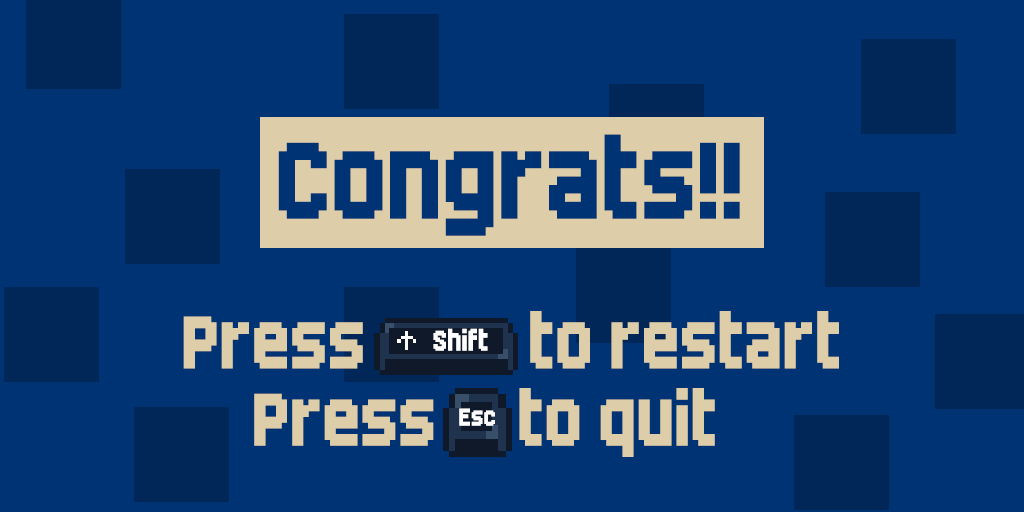
<style>
.page{position:relative;width:1024px;height:512px;background:#003373}
.page>*{position:absolute;margin:0}
.t1{font:134.7px "Born2bSportyFS";color:#003373;scale:0.94 1}
.t2{font:91.9px "Born2bSportyFS";color:#ddcda9;scale:0.94 1}
.t3{font:35.1px "Born2bSportyFS";color:#ffffff;scale:0.94 1}
.t4{font:30.3px "Born2bSportyFS";color:#ffffff;scale:0.94 1}
</style>
<div class="page">
<p class="t1" style="left:278px;top:134px;width:462px;height:102px">Congrats!!</p>
<p class="t2" style="left:183px;top:311px;width:656px;height:58px">Press          to restart</p>
<p class="t3" style="left:433px;top:328px;width:55px;height:23px">Shift</p>
<p class="t2" style="left:254px;top:388px;width:461px;height:69px">Press     to quit</p>
<p class="t4" style="left:459px;top:408px;width:36px;height:18px">Esc</p>
</div>
